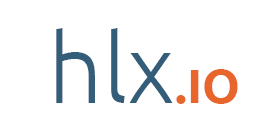
<style>
.page{position:relative;width:280px;height:140px;background:#ffffff}
.page>*{position:absolute;margin:0}
.t1{font:96px "Ubuntu-Light";color:#345d79}
.t2{font:48px "Ubuntu-Bold";color:#e8652c}
</style>
<div class="page">
<p class="t1" style="left:56px;top:28px;width:182px;height:76px">hlx<span class="t2">.IO</span></p>
</div>
